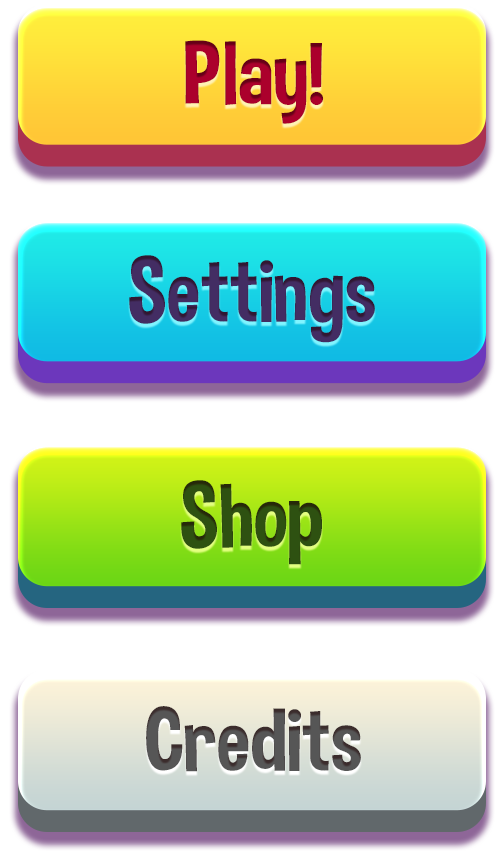
<style>
.page{position:relative;width:504px;height:854px;background:#ffffff}
.page>*{position:absolute;margin:0}
.t1{font:90px "DimboRegular";color:#ab002c}
.t2{font:90px "DimboRegular";color:#432d63}
.t3{font:90px "DimboRegular";color:#2e5111}
.t4{font:90px "DimboRegular";color:#565656}
</style>
<div class="page">
<p class="t1" style="left:185px;top:40px;width:139px;height:84px">Play!</p>
<p class="t2" style="left:129px;top:255px;width:246px;height:88px">Settings</p>
<p class="t3" style="left:181px;top:480px;width:141px;height:85px">Shop</p>
<p class="t4" style="left:146px;top:706px;width:215px;height:66px">Credits</p>
</div>
